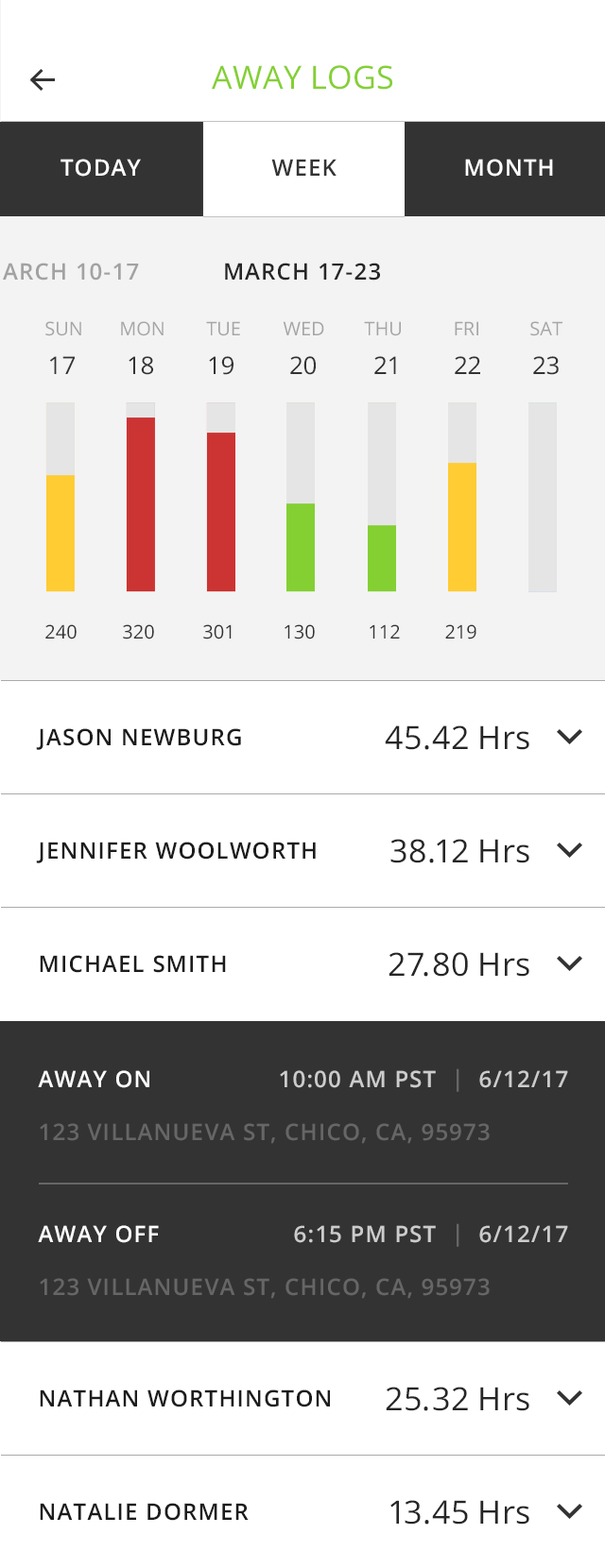
<style>
.page{position:relative;width:605px;height:1568px;background:#ffffff}
.page>*{position:absolute;margin:0}
.t1{font:32.1px "OpenSans";letter-spacing:0.01em;color:#84d033;text-transform:uppercase}
.t2{font:22.7px "OpenSans-Semibold";letter-spacing:0.05em;color:#ffffff;text-transform:uppercase}
.t3{font:22.7px "OpenSans-Semibold";letter-spacing:0.05em;color:#333333;text-transform:uppercase}
.t4{font:22.7px "OpenSans-Semibold";letter-spacing:0.05em;color:#262626;text-transform:uppercase}
.t5{font:18.9px "OpenSans";color:#a5a5a5}
.t6{font:24.4px "OpenSans";color:#333333}
.t7{font:18.9px "OpenSans";color:#333333}
.t8{font:32.1px "OpenSans";color:#262626}
.t9{font:22.7px "OpenSans-Semibold";letter-spacing:0.05em;color:#1c1c1c;text-transform:uppercase}
.t10{font:22.7px/52.9px "OpenSans-Semibold";letter-spacing:0.05em;color:#666666;text-transform:uppercase}
.t11{font:22.7px/52.9px "OpenSans-Semibold";letter-spacing:0.05em;color:#ffffff;text-transform:uppercase}
.t12{font:22.7px "OpenSans-Semibold";letter-spacing:0.05em;color:#cccccc;text-transform:uppercase}
.t13{font:22.7px "OpenSans-Semibold";letter-spacing:0.05em;color:#666666;text-transform:uppercase}
</style>
<div class="page">
<p class="t1" style="left:212px;top:65px;width:180px;height:25px">AWAY LOGS</p>
<p class="t2" style="left:60px;top:159px;width:81px;height:18px">today</p>
<p class="t3" style="left:271px;top:159px;width:65px;height:17px">week</p>
<p class="t2" style="left:465px;top:159px;width:88px;height:18px">month</p>
<p class="t4" style="left:225px;top:263px;width:155px;height:18px">march 17-23</p>
<p class="t5" style="left:45px;top:321px;width:36px;height:15px">SUN</p>
<p class="t5" style="left:121px;top:321px;width:42px;height:15px">MON</p>
<p class="t5" style="left:206px;top:321px;width:34px;height:15px">TUE</p>
<p class="t5" style="left:282px;top:321px;width:42px;height:14px">WED</p>
<p class="t5" style="left:364px;top:321px;width:37px;height:15px">THU</p>
<p class="t5" style="left:454px;top:321px;width:24px;height:14px">FRI</p>
<p class="t5" style="left:530px;top:321px;width:32px;height:15px">SAT</p>
<p class="t6" style="left:50px;top:356px;width:25px;height:18px">17</p>
<p class="t6" style="left:128px;top:356px;width:25px;height:19px">18</p>
<p class="t6" style="left:209px;top:356px;width:24px;height:19px">19</p>
<p class="t6" style="left:290px;top:356px;width:25px;height:19px">20</p>
<p class="t6" style="left:374px;top:356px;width:22px;height:18px">21</p>
<p class="t6" style="left:454px;top:356px;width:26px;height:18px">22</p>
<p class="t6" style="left:533px;top:356px;width:25px;height:19px">23</p>
<p class="t7" style="left:45px;top:624px;width:32px;height:15px">240</p>
<p class="t7" style="left:123px;top:624px;width:31px;height:15px">320</p>
<p class="t7" style="left:203px;top:624px;width:28px;height:15px">301</p>
<p class="t7" style="left:284px;top:624px;width:31px;height:15px">130</p>
<p class="t7" style="left:369px;top:624px;width:31px;height:15px">112</p>
<p class="t7" style="left:445px;top:624px;width:31px;height:15px">219</p>
<p class="t8" style="left:384px;top:725px;width:145px;height:25px">45.42 Hrs</p>
<p class="t9" style="left:36px;top:728px;width:205px;height:22px">JASON NEWBURG</p>
<p class="t9" style="left:36px;top:842px;width:279px;height:21px">JENNIFER WOOLWORTH</p>
<p class="t8" style="left:390px;top:839px;width:139px;height:24px">38.12 Hrs</p>
<p class="t8" style="left:388px;top:952px;width:141px;height:25px">27.80 Hrs</p>
<p class="t9" style="left:40px;top:955px;width:186px;height:18px">MICHAEL SMITH</p>
<p class="t10" style="left:38px;top:1070px;width:451px;height:74px"><span class="t11">AWAY ON<br></span>123 VILLANUEVA St, Chico, CA, 95973</p>
<p class="t12" style="left:280px;top:1068px;width:288px;height:24px">10:00 AM PST  <span class="t13">|</span>  6/12/17</p>
<p class="t10" style="left:38px;top:1225px;width:451px;height:74px"><span class="t11">AWAY OFF<br></span>123 VILLANUEVA St, Chico, CA, 95973</p>
<p class="t12" style="left:294px;top:1223px;width:274px;height:24px">6:15 PM PST  <span class="t13">|</span>  6/12/17</p>
<p class="t9" style="left:40px;top:1389px;width:290px;height:18px">NATHAN WORTHINGTON</p>
<p class="t8" style="left:385px;top:1387px;width:144px;height:24px">25.32 Hrs</p>
<p class="t9" style="left:40px;top:1503px;width:208px;height:18px">NATALIE DORMER</p>
<p class="t8" style="left:390px;top:1500px;width:139px;height:25px">13.45 Hrs</p>
</div>
